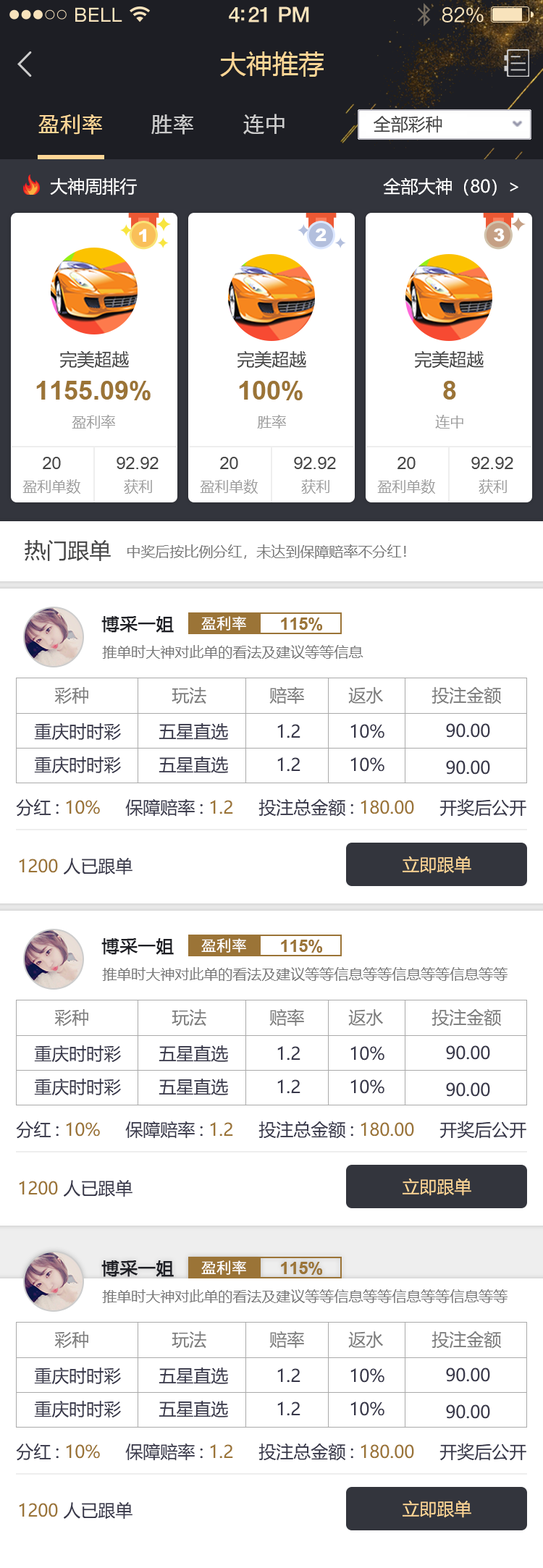
<style>
.page{position:relative;width:543px;height:1568px;background:#ffffff}
.page>*{position:absolute;margin:0}
.t1{font:26.1px "MicrosoftYaHei";color:#fed696}
.t2{font:21.7px "NotoSansHans-Regular";color:#cccccc;text-transform:uppercase}
.t3{font:21.7px "NotoSansHans-Regular";color:#fed696;text-transform:uppercase}
.t4{font:17.4px "MicrosoftYaHei";color:#464646}
.t5{font:17.4px "MicrosoftYaHei";color:#fefefe}
.t6{font:17.4px "MicrosoftYaHei";color:#ffffff}
.t7{font:17.4px "Arial-Black";color:#ffffff;text-transform:uppercase}
.t8{font:26.1px "Arial-BoldMT";color:#9b7437}
.t9{font:14.5px "MicrosoftYaHei";color:#9f9f9f}
.t10{font:17.4px "ArialMT";color:#464646}
.t11{font:21.7px "MicrosoftYaHei";color:#464646}
.t12{font:14.5px "MicrosoftYaHei";color:#787878}
.t13{font:17.4px "MicrosoftYaHei";color:#1d1e24;text-transform:uppercase;font-weight:bold}
.t14{font:15.2px "NotoSansHans-Regular";color:#ffffff;text-transform:uppercase}
.t15{font:17.4px "Arial-BoldMT";color:#9b7437;text-transform:uppercase}
.t16{font:17.4px "MicrosoftYaHei";color:#7d7d7d;text-transform:uppercase}
.t17{font:17.4px "MicrosoftYaHei";color:#38384a;text-transform:uppercase}
.t18{font:17.4px "MicrosoftYaHei";color:#9b7437;text-transform:uppercase}
.t19{font:17.4px "MicrosoftYaHei";color:#fed696;text-transform:uppercase}
</style>
<div class="page">
<p class="t1" style="left:220px;top:51px;width:104px;height:26px">大神推荐</p>
<p class="t2" style="left:243px;top:114px;width:41px;height:21px">连中</p>
<p class="t3" style="left:38px;top:114px;width:64px;height:21px">盈利率</p>
<p class="t2" style="left:151px;top:114px;width:42px;height:21px">胜率</p>
<p class="t4" style="left:374px;top:116px;width:68px;height:17px">全部彩种</p>
<p class="t5" style="left:50px;top:178px;width:87px;height:17px">大神周排行</p>
<p class="t6" style="left:383px;top:178px;width:135px;height:18px">全部大神（80）&gt;</p>
<p class="t7" style="left:139px;top:229px;width:7px;height:13px">1</p>
<p class="t7" style="left:316px;top:228px;width:10px;height:13px">2</p>
<p class="t7" style="left:494px;top:228px;width:11px;height:14px">3</p>
<p class="t4" style="left:59px;top:350px;width:70px;height:18px">完美超越</p>
<p class="t4" style="left:237px;top:350px;width:69px;height:18px">完美超越</p>
<p class="t4" style="left:414px;top:350px;width:70px;height:18px">完美超越</p>
<p class="t8" style="left:36px;top:381px;width:115px;height:19px">1155.09%</p>
<p class="t8" style="left:239px;top:381px;width:64px;height:19px">100%</p>
<p class="t8" style="left:443px;top:381px;width:13px;height:19px">8</p>
<p class="t9" style="left:72px;top:415px;width:43px;height:14px">盈利率</p>
<p class="t9" style="left:257px;top:415px;width:29px;height:14px">胜率</p>
<p class="t9" style="left:435px;top:415px;width:28px;height:14px">连中</p>
<p class="t10" style="left:43px;top:457px;width:18px;height:12px">20</p>
<p class="t10" style="left:117px;top:457px;width:42px;height:12px">92.92</p>
<p class="t10" style="left:220px;top:457px;width:18px;height:12px">20</p>
<p class="t10" style="left:294px;top:457px;width:42px;height:12px">92.92</p>
<p class="t10" style="left:397px;top:457px;width:19px;height:12px">20</p>
<p class="t10" style="left:471px;top:457px;width:42px;height:12px">92.92</p>
<p class="t9" style="left:22px;top:479px;width:58px;height:15px">盈利单数</p>
<p class="t9" style="left:124px;top:479px;width:28px;height:15px">获利</p>
<p class="t9" style="left:200px;top:479px;width:58px;height:15px">盈利单数</p>
<p class="t9" style="left:301px;top:479px;width:28px;height:15px">获利</p>
<p class="t9" style="left:377px;top:479px;width:58px;height:15px">盈利单数</p>
<p class="t9" style="left:479px;top:479px;width:28px;height:15px">获利</p>
<p class="t11" style="left:25px;top:540px;width:86px;height:21px">热门跟单</p>
<p class="t12" style="left:127px;top:544px;width:279px;height:15px">中奖后按比例分红，未达到保障赔率不分红！</p>
<p class="t13" style="left:101px;top:616px;width:73px;height:17px">博采一姐</p>
<p class="t14" style="left:201px;top:616px;width:45px;height:15px">盈利率</p>
<p class="t15" style="left:281px;top:617px;width:41px;height:14px">115%</p>
<p class="t12" style="left:102px;top:645px;width:261px;height:14px">推单时大神对此单的看法及建议等等信息</p>
<p class="t16" style="left:54px;top:687px;width:34px;height:17px">彩种</p>
<p class="t16" style="left:172px;top:687px;width:34px;height:17px">玩法</p>
<p class="t16" style="left:269px;top:687px;width:35px;height:17px">赔率</p>
<p class="t16" style="left:348px;top:687px;width:35px;height:17px">返水</p>
<p class="t16" style="left:431px;top:687px;width:71px;height:17px">投注金额</p>
<p class="t17" style="left:34px;top:723px;width:87px;height:18px">重庆时时彩</p>
<p class="t17" style="left:159px;top:723px;width:69px;height:17px">五星直选</p>
<p class="t17" style="left:277px;top:724px;width:23px;height:14px">1.2</p>
<p class="t17" style="left:350px;top:724px;width:34px;height:14px">10%</p>
<p class="t17" style="left:446px;top:723px;width:44px;height:15px">90.00</p>
<p class="t17" style="left:34px;top:756px;width:87px;height:18px">重庆时时彩</p>
<p class="t17" style="left:159px;top:756px;width:69px;height:17px">五星直选</p>
<p class="t17" style="left:277px;top:757px;width:23px;height:15px">1.2</p>
<p class="t17" style="left:350px;top:757px;width:34px;height:15px">10%</p>
<p class="t17" style="left:446px;top:760px;width:44px;height:15px">90.00</p>
<p class="t17" style="left:16px;top:798px;width:510px;height:19px">分红: <span class="t18">10% </span>    保障赔率: <span class="t18">1.2 </span>    投注总金额: <span class="t18">180.00     </span>开奖后公开</p>
<p class="t18" style="left:19px;top:858px;width:113px;height:17px">1200 <span class="t17">人已跟单</span></p>
<p class="t19" style="left:402px;top:856px;width:69px;height:18px">立即跟单</p>
<p class="t13" style="left:101px;top:938px;width:73px;height:17px">博采一姐</p>
<p class="t14" style="left:201px;top:938px;width:45px;height:15px">盈利率</p>
<p class="t15" style="left:281px;top:940px;width:41px;height:13px">115%</p>
<p class="t12" style="left:102px;top:967px;width:405px;height:14px">推单时大神对此单的看法及建议等等信息等等信息等等信息等等</p>
<p class="t16" style="left:54px;top:1009px;width:34px;height:18px">彩种</p>
<p class="t16" style="left:172px;top:1009px;width:34px;height:18px">玩法</p>
<p class="t16" style="left:269px;top:1009px;width:35px;height:18px">赔率</p>
<p class="t16" style="left:348px;top:1009px;width:35px;height:17px">返水</p>
<p class="t16" style="left:431px;top:1009px;width:71px;height:18px">投注金额</p>
<p class="t17" style="left:34px;top:1045px;width:87px;height:18px">重庆时时彩</p>
<p class="t17" style="left:159px;top:1045px;width:69px;height:17px">五星直选</p>
<p class="t17" style="left:277px;top:1046px;width:23px;height:15px">1.2</p>
<p class="t17" style="left:350px;top:1046px;width:34px;height:15px">10%</p>
<p class="t17" style="left:446px;top:1045px;width:44px;height:15px">90.00</p>
<p class="t17" style="left:34px;top:1079px;width:87px;height:17px">重庆时时彩</p>
<p class="t17" style="left:159px;top:1079px;width:69px;height:16px">五星直选</p>
<p class="t17" style="left:277px;top:1079px;width:23px;height:15px">1.2</p>
<p class="t17" style="left:350px;top:1079px;width:34px;height:15px">10%</p>
<p class="t17" style="left:446px;top:1082px;width:44px;height:15px">90.00</p>
<p class="t17" style="left:16px;top:1121px;width:510px;height:18px">分红: <span class="t18">10% </span>    保障赔率: <span class="t18">1.2 </span>    投注总金额: <span class="t18">180.00     </span>开奖后公开</p>
<p class="t18" style="left:19px;top:1180px;width:113px;height:17px">1200 <span class="t17">人已跟单</span></p>
<p class="t19" style="left:402px;top:1178px;width:69px;height:18px">立即跟单</p>
<p class="t13" style="left:101px;top:1260px;width:73px;height:17px">博采一姐</p>
<p class="t14" style="left:201px;top:1260px;width:45px;height:15px">盈利率</p>
<p class="t15" style="left:281px;top:1262px;width:41px;height:13px">115%</p>
<p class="t12" style="left:102px;top:1289px;width:405px;height:14px">推单时大神对此单的看法及建议等等信息等等信息等等信息等等</p>
<p class="t16" style="left:54px;top:1331px;width:34px;height:18px">彩种</p>
<p class="t16" style="left:172px;top:1331px;width:34px;height:18px">玩法</p>
<p class="t16" style="left:269px;top:1331px;width:35px;height:18px">赔率</p>
<p class="t16" style="left:348px;top:1331px;width:35px;height:17px">返水</p>
<p class="t16" style="left:431px;top:1331px;width:71px;height:18px">投注金额</p>
<p class="t17" style="left:34px;top:1367px;width:87px;height:18px">重庆时时彩</p>
<p class="t17" style="left:159px;top:1367px;width:69px;height:17px">五星直选</p>
<p class="t17" style="left:277px;top:1368px;width:23px;height:15px">1.2</p>
<p class="t17" style="left:350px;top:1368px;width:34px;height:15px">10%</p>
<p class="t17" style="left:446px;top:1367px;width:44px;height:15px">90.00</p>
<p class="t17" style="left:34px;top:1401px;width:87px;height:17px">重庆时时彩</p>
<p class="t17" style="left:159px;top:1401px;width:69px;height:16px">五星直选</p>
<p class="t17" style="left:277px;top:1401px;width:23px;height:15px">1.2</p>
<p class="t17" style="left:350px;top:1401px;width:34px;height:15px">10%</p>
<p class="t17" style="left:446px;top:1404px;width:44px;height:15px">90.00</p>
<p class="t17" style="left:16px;top:1443px;width:510px;height:18px">分红: <span class="t18">10% </span>    保障赔率: <span class="t18">1.2 </span>    投注总金额: <span class="t18">180.00     </span>开奖后公开</p>
<p class="t18" style="left:19px;top:1502px;width:113px;height:17px">1200 <span class="t17">人已跟单</span></p>
<p class="t19" style="left:402px;top:1500px;width:69px;height:18px">立即跟单</p>
</div>
